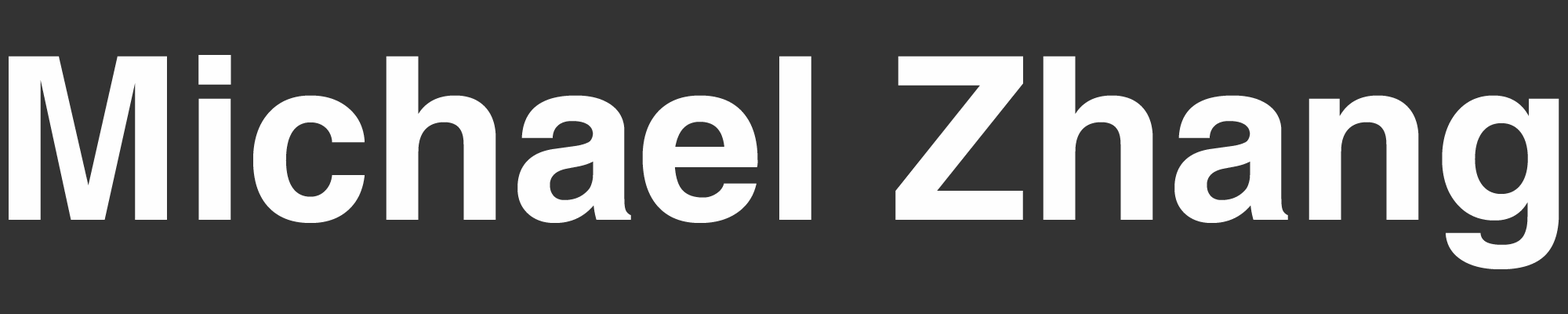
<style>
.page{position:relative;width:1568px;height:314px;background:#333333}
.page>*{position:absolute;margin:0}
.t1{font:227.4px "Helvetica-Bold";color:#fefefe}
</style>
<div class="page">
<p class="t1" style="left:9px;top:55px;width:1550px;height:214px">Michael Zhang</p>
</div>
